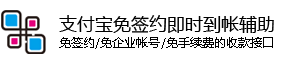
<style>
.page{position:relative;width:290px;height:65px;background:#ffffff}
.page>*{position:absolute;margin:0}
.t1{font:18px "MicrosoftYaHei";color:#000000}
.t2{font:12px "MicrosoftYaHei";letter-spacing:0.005em;color:#000000}
</style>
<div class="page">
<p class="t1" style="left:59px;top:15px;width:215px;height:18px">支付宝免签约即时到帐辅助</p>
<p class="t2" style="left:59px;top:37px;width:214px;height:12px">免签约/免企业帐号/免手续费的收款接口</p>
</div>
